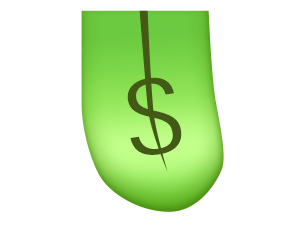
<style>
.page{position:relative;width:284px;height:242px;background:#ffffff}
.page>*{position:absolute;margin:0}
.t1{font:110px "AcuminConcept-CondensedLight";letter-spacing:0.025em;color:#435916;text-transform:uppercase;scale:1.3 1}
</style>
<div class="page">
<p class="t1" style="left:127px;top:77px;width:55px;height:78px;rotate:-8deg">S</p>
</div>
